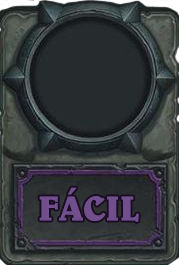
<style>
.page{position:relative;width:179px;height:265px}
.page>*{position:absolute;margin:0}
.t1{font:35px "BelweBT-Bold";color:#714f8d}
</style>
<div class="page">
<p class="t1" style="left:39px;top:187px;width:100px;height:35px">FÁCIL</p>
</div>
